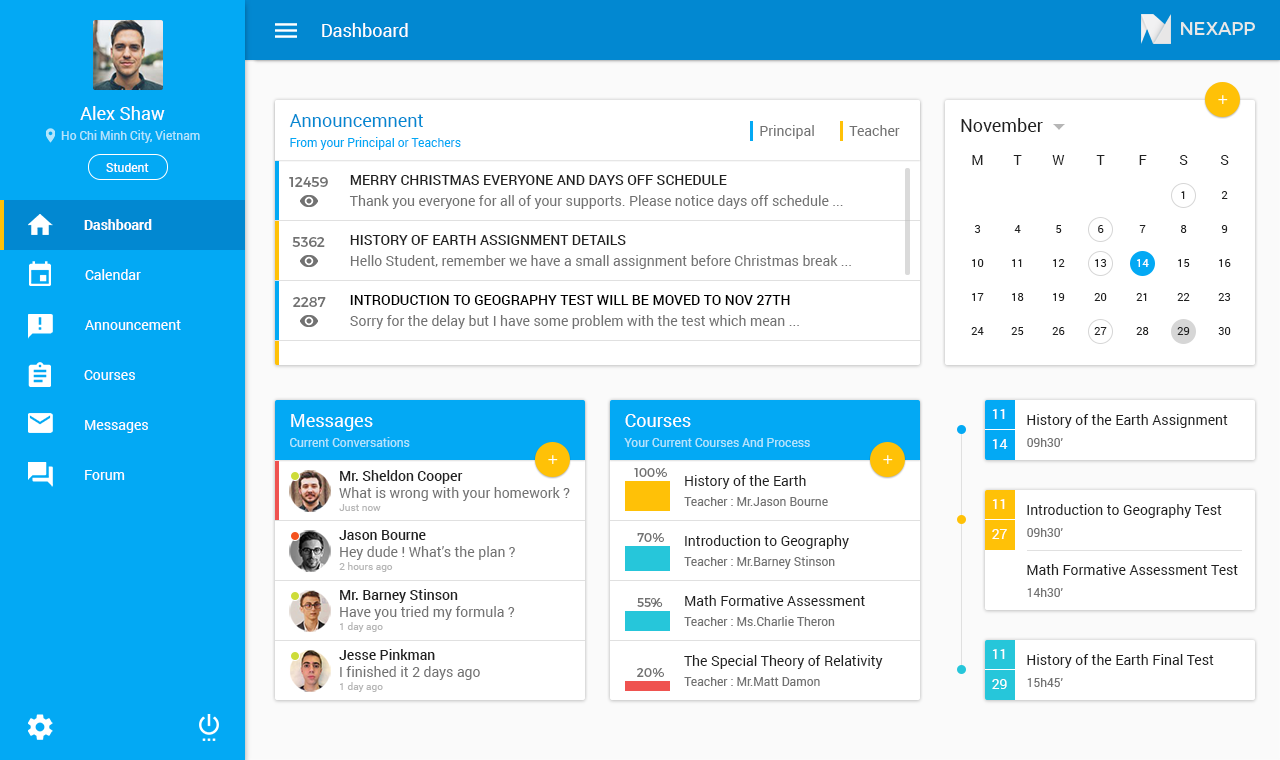
<style>
.page{position:relative;width:1280px;height:760px;background:#ffffff}
.page>*{position:absolute;margin:0}
.t1{font:18px "Roboto-Regular";color:#ffffff}
.t2{font:18px "Roboto-Regular";color:#fffefe}
.t3{font:18px "Roboto-Regular";color:#0288d1}
.t4{font:14px "Roboto-Regular";color:#727272}
.t5{font:18px "Roboto-Regular";color:#212121}
.t6{font:12px "Roboto-Regular";color:#b3e5fc}
.t7{font:12px "Roboto-Regular";color:#03a9f4}
.t8{font:11px/34px "Roboto-Regular";color:#212121}
.t9{font:14px/34px "Roboto-Regular";color:#212121}
.t10{font:11px/34px "Roboto-Regular";color:#ffffff}
.t11{font:12px "Roboto-Regular";color:#fffefe}
.t12{font:14px "Montserrat-Regular";color:#727272}
.t13{font:14px/21px "Roboto-Regular";color:#727272}
.t14{font:14px/21px "Roboto-Medium";color:#212121}
.t15{font:14px "Roboto-Bold";color:#fffefe}
.t16{font:14px "Roboto-Regular";color:#fffefe}
.t17{font:14px/21px "Roboto-Medium";color:#000000;text-transform:uppercase}
.t18{font:14px/30px "Roboto-Regular";color:#ffffff}
.t19{font:14px "Roboto-Regular";color:#212121}
.t20{font:12px "Roboto-Regular";color:#727272}
.t21{font:14px "Roboto-Medium";color:#212121}
.t22{font:12px "Montserrat-Regular";color:#727272}
.t23{font:10px "Roboto-Regular";color:#b6b6b6}
</style>
<div class="page">
<p class="t1" style="left:322px;top:23px;width:86px;height:14px">Dashboard</p>
<p class="t2" style="left:80px;top:106px;width:85px;height:14px">Alex Shaw</p>
<p class="t3" style="left:289px;top:114px;width:134px;height:13px">Announcemnent</p>
<p class="t4" style="left:760px;top:125px;width:54px;height:14px">Principal</p>
<p class="t4" style="left:849px;top:125px;width:51px;height:11px">Teacher</p>
<p class="t5" style="left:961px;top:118px;width:82px;height:14px">November</p>
<p class="t6" style="left:61px;top:130px;width:139px;height:13px">Ho Chi Minh City, Vietnam</p>
<p class="t7" style="left:290px;top:137px;width:171px;height:13px">From your Principal or Teachers</p>
<p class="t8" style="left:971px;top:155px;width:13px;height:180px;text-align:center"><span class="t9">M<br><br></span>3<br>10<br>17<br>24</p>
<p class="t8" style="left:1011px;top:155px;width:13px;height:180px;text-align:center"><span class="t9">T<br><br></span>4<br>11<br>18<br>25</p>
<p class="t8" style="left:1052px;top:155px;width:13px;height:180px;text-align:center"><span class="t9">W<br><br></span>5<br>12<br>19<br>26</p>
<p class="t8" style="left:1094px;top:155px;width:13px;height:180px;text-align:center"><span class="t9">T<br><br></span>6<br>13<br>20<br>27</p>
<p class="t8" style="left:1136px;top:155px;width:13px;height:180px;text-align:center"><span class="t9">F<br><br></span>7<br><span class="t10">14<br></span>21<br>28</p>
<p class="t8" style="left:1177px;top:155px;width:13px;height:180px;text-align:center"><span class="t9">S<br></span>1<br>8<br>15<br>22<br>29</p>
<p class="t8" style="left:1218px;top:155px;width:13px;height:180px;text-align:center"><span class="t9">S<br></span>2<br>9<br>16<br>23<br>30</p>
<p class="t11" style="left:106px;top:163px;width:43px;height:9px">Student</p>
<p class="t12" style="left:289px;top:177px;width:39px;height:10px">12459</p>
<p class="t13" style="left:349px;top:175px;width:494px;height:34px"><span class="t14">MERRY CHRISTMAS EVERYONE AND DAYS OFF SCHEDULE<br></span>Thank you everyone for all of your supports. Please notice days off schedule ...</p>
<p class="t15" style="left:84px;top:219px;width:68px;height:11px">Dashboard</p>
<p class="t12" style="left:292px;top:237px;width:33px;height:10px">5362</p>
<p class="t13" style="left:350px;top:235px;width:501px;height:34px"><span class="t14">HISTORY OF EARTH ASSIGNMENT DETAILS<br></span>Hello Student, remember we have a small assignment before Christmas break ...</p>
<p class="t16" style="left:85px;top:269px;width:56px;height:11px">Calendar</p>
<p class="t12" style="left:293px;top:297px;width:33px;height:10px">2287</p>
<p class="t13" style="left:350px;top:295px;width:449px;height:34px;text-align:justify"><span class="t17">Introduction to Geography Test WILL BE MOVED TO NOV 27TH <br></span>Sorry for the delay but I have some problem with the test which mean ...</p>
<p class="t16" style="left:85px;top:320px;width:96px;height:10px">Announcement</p>
<p class="t16" style="left:84px;top:370px;width:51px;height:10px">Courses</p>
<p class="t1" style="left:291px;top:414px;width:82px;height:17px">Messages</p>
<p class="t1" style="left:625px;top:414px;width:66px;height:13px">Courses</p>
<p class="t18" style="left:992px;top:409px;width:16px;height:40px">11<br>14</p>
<p class="t19" style="left:1027px;top:414px;width:201px;height:14px">History of the Earth Assignment</p>
<p class="t16" style="left:85px;top:420px;width:63px;height:13px">Messages</p>
<p class="t6" style="left:290px;top:437px;width:120px;height:10px">Current Conversations</p>
<p class="t6" style="left:624px;top:438px;width:186px;height:9px">Your Current Courses And Process</p>
<p class="t20" style="left:1027px;top:438px;width:36px;height:9px">09h30’</p>
<p class="t16" style="left:85px;top:470px;width:40px;height:10px">Forum</p>
<p class="t4" style="left:339px;top:470px;width:231px;height:31px"><span class="t21">Mr. Sheldon Cooper<br></span>What is wrong with your homework ?</p>
<p class="t22" style="left:634px;top:468px;width:33px;height:9px">100%</p>
<p class="t19" style="left:685px;top:475px;width:121px;height:14px">History of the Earth</p>
<p class="t20" style="left:684px;top:497px;width:144px;height:9px">Teacher : Mr.Jason Bourne</p>
<p class="t23" style="left:339px;top:504px;width:42px;height:7px">Just now</p>
<p class="t18" style="left:992px;top:499px;width:15px;height:40px">11<br>27</p>
<p class="t19" style="left:1027px;top:504px;width:195px;height:14px">Introduction to Geography Test</p>
<p class="t4" style="left:339px;top:530px;width:176px;height:30px"><span class="t21">Jason Bourne<br></span>Hey dude ! What’s the plan ?</p>
<p class="t22" style="left:637px;top:533px;width:27px;height:9px">70%</p>
<p class="t20" style="left:1027px;top:528px;width:36px;height:9px">09h30’</p>
<p class="t19" style="left:685px;top:535px;width:164px;height:14px">Introduction to Geography</p>
<p class="t20" style="left:684px;top:556px;width:151px;height:13px">Teacher : Mr.Barney Stinson</p>
<p class="t23" style="left:339px;top:562px;width:54px;height:10px">2 hours ago</p>
<p class="t19" style="left:1027px;top:564px;width:211px;height:11px">Math Formative Assessment Test</p>
<p class="t4" style="left:340px;top:589px;width:175px;height:31px"><span class="t21">Mr. Barney Stinson<br></span>Have you tried my formula ?</p>
<p class="t20" style="left:1027px;top:588px;width:36px;height:9px">14h30’</p>
<p class="t22" style="left:637px;top:598px;width:26px;height:9px">55%</p>
<p class="t19" style="left:685px;top:595px;width:180px;height:11px">Math Formative Assessment</p>
<p class="t20" style="left:684px;top:616px;width:151px;height:10px">Teacher : Ms.Charlie Theron</p>
<p class="t23" style="left:340px;top:622px;width:43px;height:10px">1 day ago</p>
<p class="t4" style="left:339px;top:649px;width:141px;height:31px"><span class="t21">Jesse Pinkman<br></span>I finished it 2 days ago</p>
<p class="t18" style="left:992px;top:649px;width:15px;height:40px">11<br>29</p>
<p class="t19" style="left:1027px;top:654px;width:187px;height:14px">History of the Earth Final Test</p>
<p class="t19" style="left:684px;top:655px;width:199px;height:14px">The Special Theory of Relativity</p>
<p class="t22" style="left:637px;top:668px;width:27px;height:9px">20%</p>
<p class="t20" style="left:684px;top:677px;width:136px;height:9px">Teacher : Mr.Matt Damon</p>
<p class="t20" style="left:1027px;top:678px;width:36px;height:9px">15h45’</p>
<p class="t23" style="left:340px;top:682px;width:43px;height:10px">1 day ago</p>
</div>
